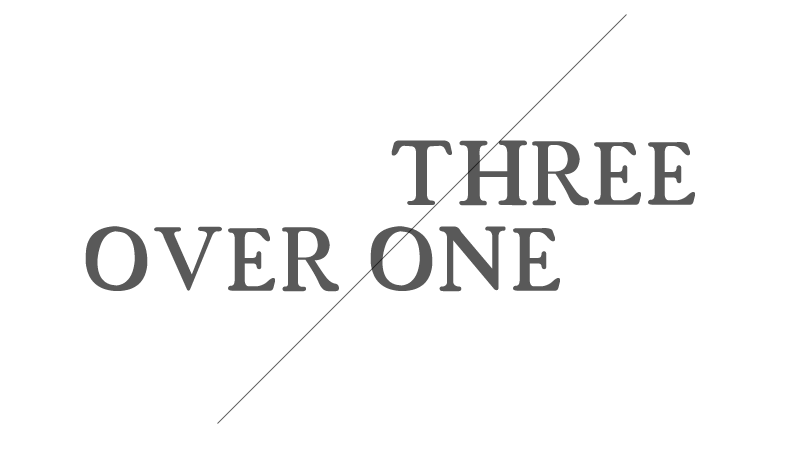
<style>
.page{position:relative;width:800px;height:450px;background:#ffffff}
.page>*{position:absolute;margin:0}
.t1{font:125px "18thCentury";color:#595959}
</style>
<div class="page">
<p class="t1" style="left:391px;top:140px;width:304px;height:66px">THREE</p>
<p class="t1" style="left:85px;top:226px;width:475px;height:66px">OVER ONE</p>
</div>
